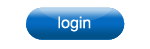
<style>
.page{position:relative;width:150px;height:49px;background:#ffffff}
.page>*{position:absolute;margin:0}
.t1{font:16px "ArialMT";color:#ffffff}
</style>
<div class="page">
<p class="t1" style="left:58px;top:16px;width:33px;height:16px">login</p>
</div>
